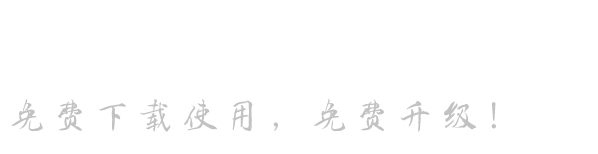
<style>
.page{position:relative;width:598px;height:154px;background:#ffffff}
.page>*{position:absolute;margin:0}
.t1{font:36px "Tensentype-TieShanKaiShuJ";letter-spacing:0.2em;color:#c2c2c2}
</style>
<div class="page">
<p class="t1" style="left:11px;top:99px;width:485px;height:33px">免费下载使用，免费升级！</p>
</div>
